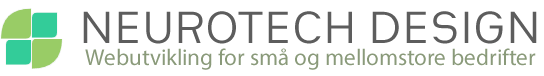
<style>
.page{position:relative;width:544px;height:76px;background:#ffffff}
.page>*{position:absolute;margin:0}
.t1{font:48px "HeimatSans-Regular";color:#5d5d5d}
.t2{font:23px "MyriadPro-Regular";color:#8a9a7a}
</style>
<div class="page">
<p class="t1" style="left:83px;top:11px;width:454px;height:33px">NEUROTECH DESIGN</p>
<p class="t2" style="left:85px;top:48px;width:451px;height:22px">Webutvikling for små og mellomstore bedrifter</p>
</div>
